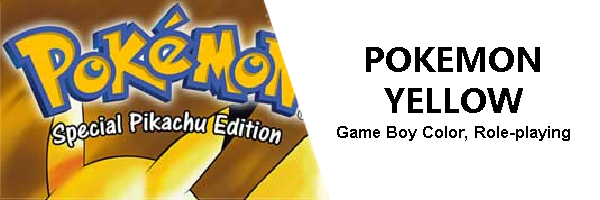
<style>
.page{position:relative;width:600px;height:200px;background:#ffffff}
.page>*{position:absolute;margin:0}
.t1{font:16.7px/25px "Arial-BoldMT";color:#000000}
.t2{font:33.3px/41.7px "MicrosoftYaHei-Bold";color:#000000}
</style>
<div class="page">
<p class="t1" style="left:337px;top:47px;width:233px;height:94px;text-align:center"><span class="t2">POKEMON YELLOW<br></span>Game Boy Color, Role-playing</p>
</div>
